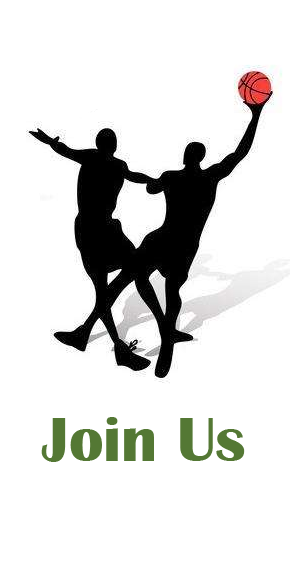
<style>
.page{position:relative;width:290px;height:567px;background:#ffffff}
.page>*{position:absolute;margin:0}
.t1{font:64px "BritannicBold";color:#547834}
</style>
<div class="page">
<p class="t1" style="left:41px;top:417px;width:204px;height:45px">Join Us</p>
</div>
